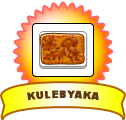
<style>
.page{position:relative;width:126px;height:120px;background:#ffffff}
.page>*{position:absolute;margin:0}
.t1{font:9.4px "Arial-Black";letter-spacing:0.075em;color:#5b3714;text-transform:uppercase}
</style>
<div class="page">
<p class="t1" style="left:27px;top:90px;width:72px;height:11px">KULEBYAKA</p>
</div>
